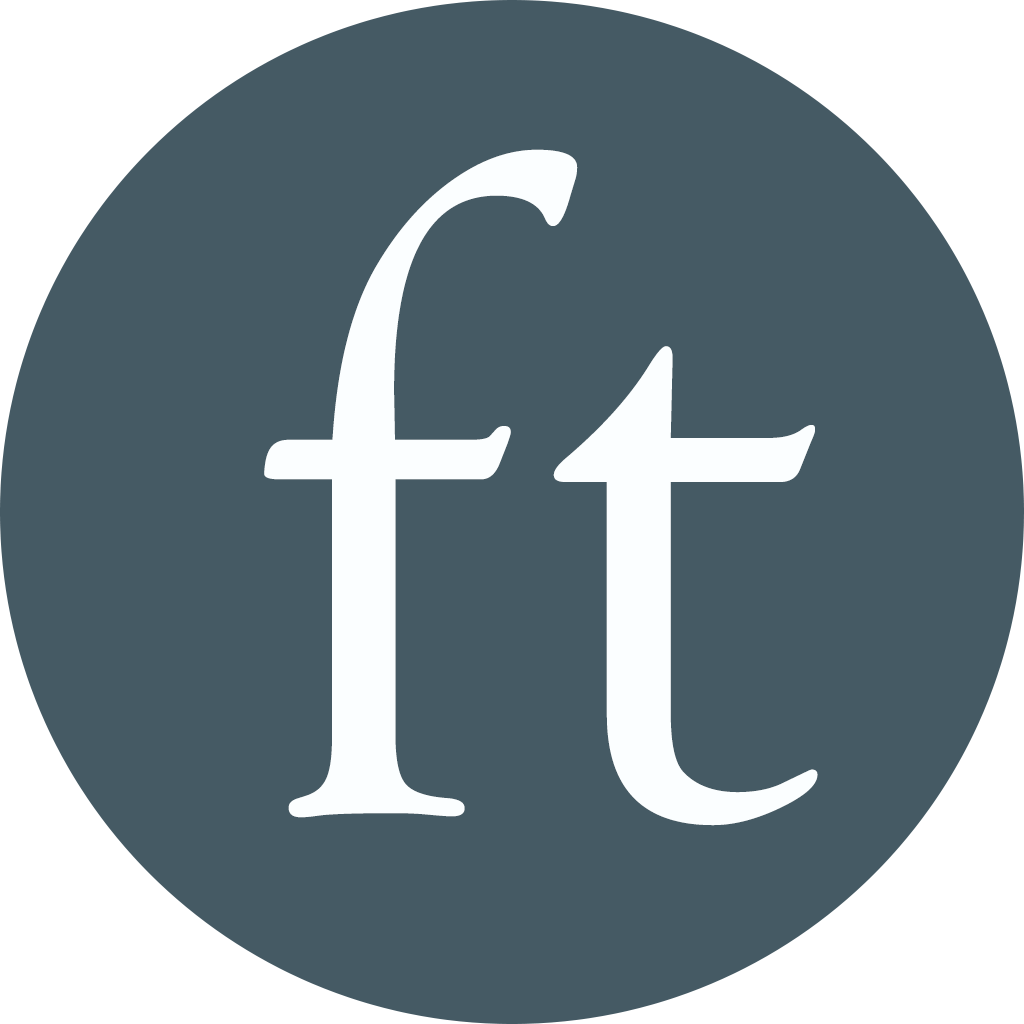
<style>
.page{position:relative;width:1024px;height:1024px;background:#455a64}
.page>*{position:absolute;margin:0}
.t1{font:944.4px "GoudyOldStyleT-Regular";color:#fbfeff}
</style>
<div class="page">
<p class="t1" style="left:264px;top:149px;width:554px;height:677px">ft</p>
</div>
